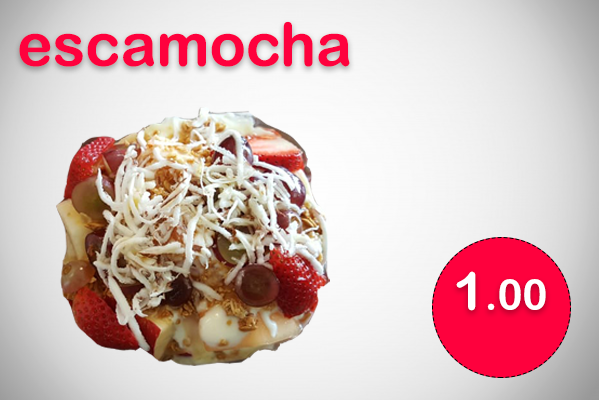
<style>
.page{position:relative;width:600px;height:400px}
.page>*{position:absolute;margin:0}
.t1{font:60px "ArialRoundedMTBold";color:#fe013d}
.t2{font:41.9px "ArialRoundedMTBold";color:#ffffff}
.t3{font:52.3px "ArialRoundedMTBold";color:#ffffff}
</style>
<div class="page">
<p class="t1" style="left:19px;top:21px;width:331px;height:46px">escamocha</p>
<p class="t2" style="left:456px;top:271px;width:90px;height:40px"><span class="t3">1</span>.00</p>
</div>
